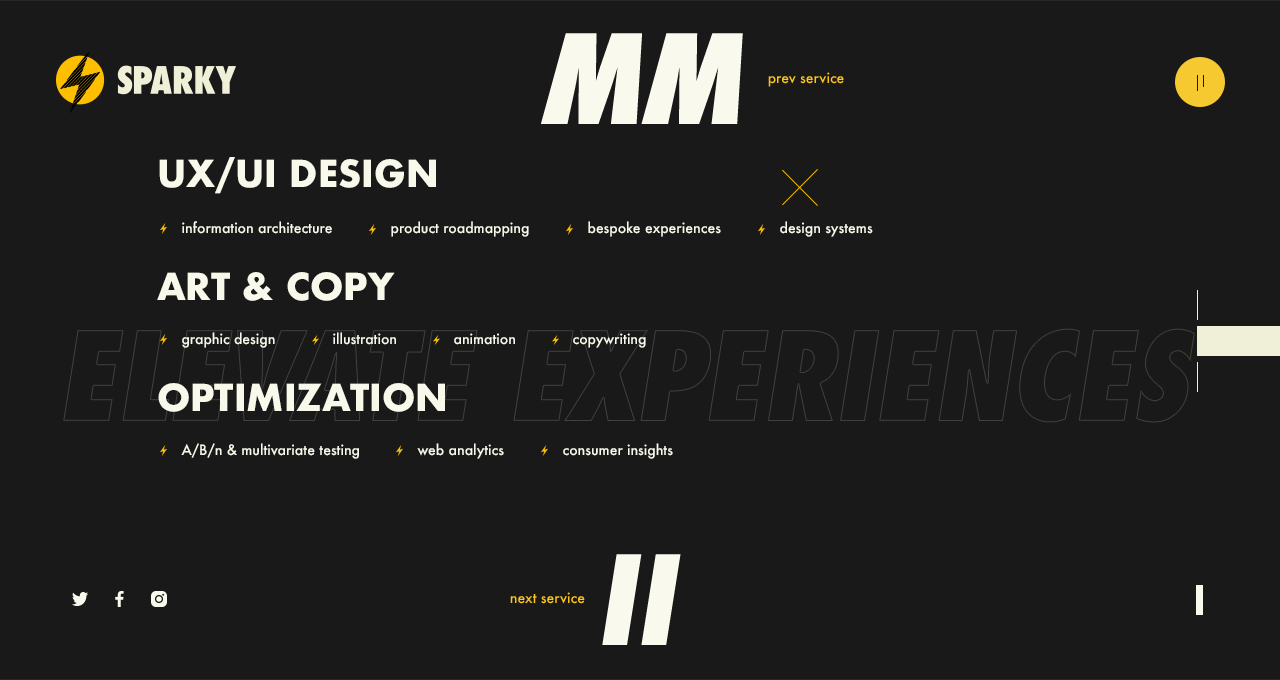
<style>
.page{position:relative;width:1280px;height:680px;background:#191919}
.page>*{position:absolute;margin:0}
.t1{font:120px "Futura-CondExtraBoldObl";color:#f8f8eb;text-transform:uppercase}
.t2{font:14px "Futura-Medium";color:#fdc519}
.t3{font:36px "Futura-Bold";color:#f8f8eb}
.t4{font:14px "Futura-Medium";color:#f8f8eb}
</style>
<div class="page">
<p class="t1" style="left:541px;top:33px;width:202px;height:91px">mm</p>
<p class="t2" style="left:768px;top:72px;width:76px;height:15px">prev service</p>
<p class="t3" style="left:159px;top:157px;width:277px;height:37px">UX/UI DESIGN</p>
<p class="t4" style="left:182px;top:221px;width:150px;height:13px">information architecture</p>
<p class="t4" style="left:391px;top:221px;width:138px;height:16px">product roadmapping</p>
<p class="t4" style="left:588px;top:221px;width:133px;height:16px">bespoke experiences</p>
<p class="t4" style="left:780px;top:221px;width:93px;height:16px">design systems</p>
<p class="t3" style="left:157px;top:272px;width:238px;height:29px">ART &amp; COPY</p>
<p class="t4" style="left:182px;top:332px;width:93px;height:16px">graphic design</p>
<p class="t4" style="left:333px;top:332px;width:63px;height:13px">illustration</p>
<p class="t4" style="left:454px;top:333px;width:61px;height:12px">animation</p>
<p class="t4" style="left:573px;top:333px;width:73px;height:15px">copywriting</p>
<p class="t3" style="left:158px;top:383px;width:287px;height:29px">OPTIMIZATION</p>
<p class="t4" style="left:181px;top:443px;width:178px;height:16px">A/B/n &amp; multivariate testing</p>
<p class="t4" style="left:417px;top:443px;width:87px;height:16px">web analytics</p>
<p class="t4" style="left:563px;top:443px;width:110px;height:16px">consumer insights</p>
<p class="t1" style="left:602px;top:554px;width:79px;height:91px">ii</p>
<p class="t2" style="left:510px;top:592px;width:75px;height:12px">next service</p>
</div>
